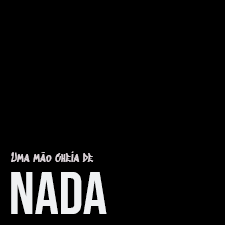
<style>
.page{position:relative;width:225px;height:225px;background:#000000}
.page>*{position:absolute;margin:0}
.t1{font:12px "SedgwickAveDisplay-Regular";color:#dbd3d8}
.t2{font:60px "BebasNeue-Regular";color:#eff1f3}
</style>
<div class="page">
<p class="t1" style="left:11px;top:151px;width:83px;height:11px">Uma mão cheia de</p>
<p class="t2" style="left:11px;top:172px;width:96px;height:42px">Nada</p>
</div>
